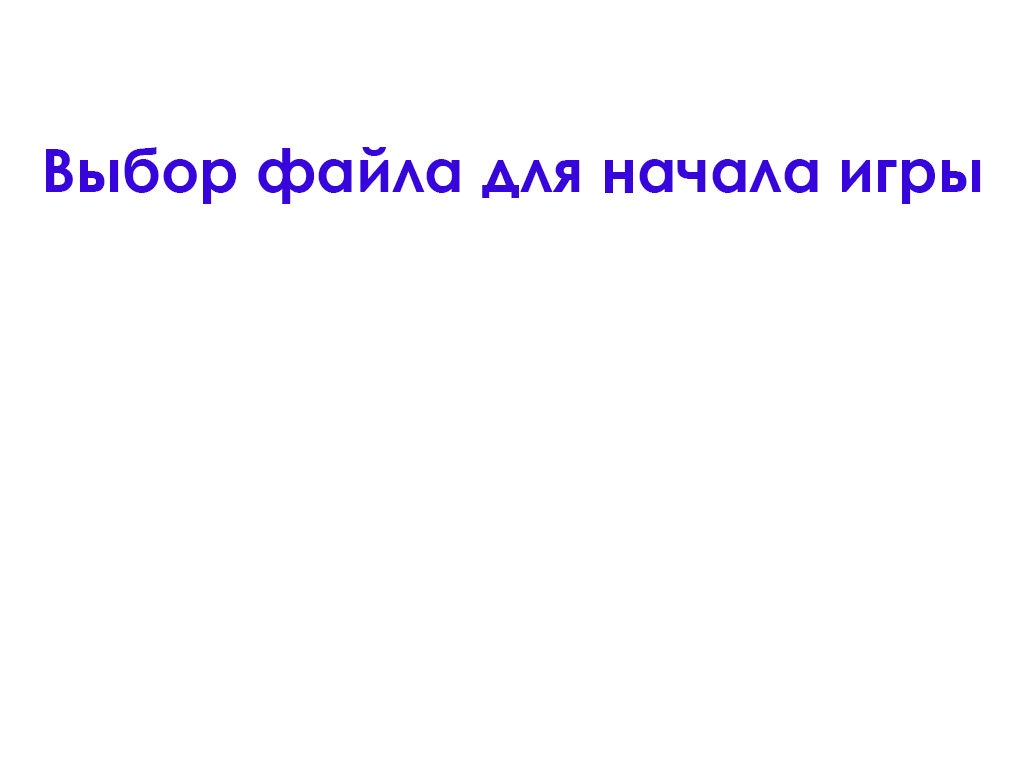
<style>
.page{position:relative;width:1024px;height:763px;background:#ffffff}
.page>*{position:absolute;margin:0}
.t1{font:60px "CenturyGothic-Bold";color:#3705db}
</style>
<div class="page">
<p class="t1" style="left:46px;top:147px;width:935px;height:57px">Выбор файла для начала игры</p>
</div>
